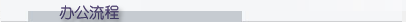
<style>
.page{position:relative;width:406px;height:22px;background:#f5f6f8}
.page>*{position:absolute;margin:0}
.t1{font:15px "YouYuan";color:#403963}
</style>
<div class="page">
<p class="t1" style="left:59px;top:5px;width:60px;height:15px">办公流程</p>
</div>
